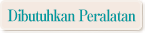
<style>
.page{position:relative;width:145px;height:33px;background:#f4e9e1}
.page>*{position:absolute;margin:0}
.t1{font:16px "RyuminPro-ExBold";letter-spacing:-0.08em;color:#019a9f;scale:0.9 1}
</style>
<div class="page">
<p class="t1" style="left:7px;top:9px;width:129px;height:13px">Dibutuhkan Peralatan</p>
</div>
